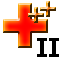
<style>
.page{position:relative;width:64px;height:64px;background:#ffffff}
.page>*{position:absolute;margin:0}
.t1{font:25px "Tahoma-Bold";color:#000000}
</style>
<div class="page">
<p class="t1" style="left:37px;top:38px;width:22px;height:19px">II</p>
</div>
